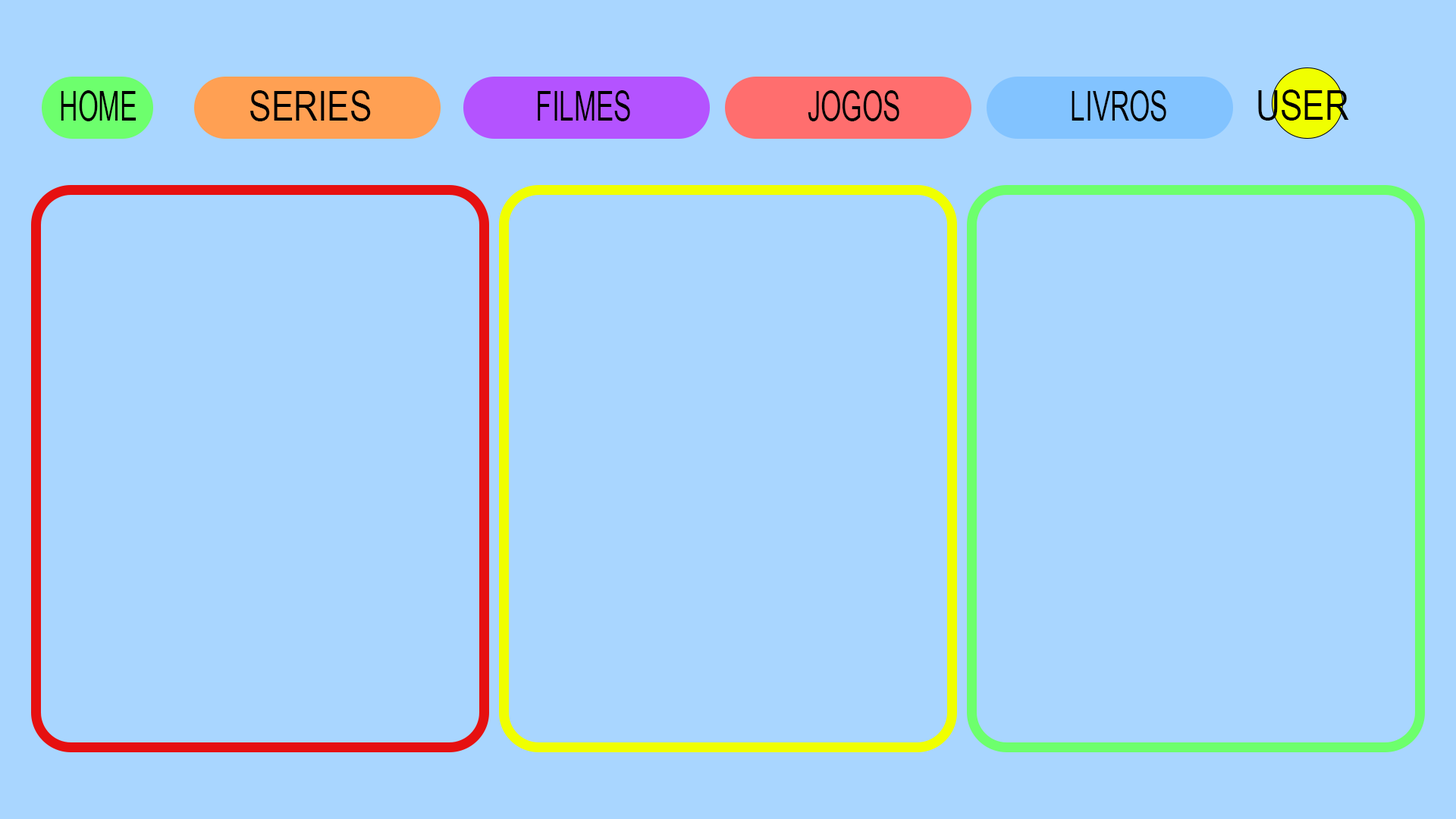
<style>
.page{position:relative;width:1456px;height:819px;background:#a9d6ff}
.page>*{position:absolute;margin:0}
.t1{font:40.9px "ArialNarrow";color:#000000;text-transform:uppercase}
.t2{font:40.9px "ArialNarrow";color:#000000;text-transform:uppercase;scale:0.77 1}
.t3{font:40.9px "ArialNarrow";color:#000000;text-transform:uppercase;scale:0.79 1}
</style>
<div class="page">
<p class="t1" style="left:1258px;top:89px;width:91px;height:32px">user</p>
<p class="t2" style="left:61px;top:90px;width:75px;height:31px">homere</p>
<p class="t1" style="left:250px;top:90px;width:121px;height:31px">series</p>
<p class="t3" style="left:538px;top:90px;width:92px;height:31px">filmes</p>
<p class="t3" style="left:808px;top:90px;width:91px;height:31px">jogos</p>
<p class="t3" style="left:1072px;top:90px;width:94px;height:31px">livros</p>
</div>
